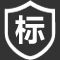
<style>
.page{position:relative;width:60px;height:60px;background:#333333}
.page>*{position:absolute;margin:0}
.t1{font:30px "MicrosoftYaHei-Bold";color:#ffffff}
</style>
<div class="page">
<p class="t1" style="left:15px;top:15px;width:30px;height:29px">标</p>
</div>
